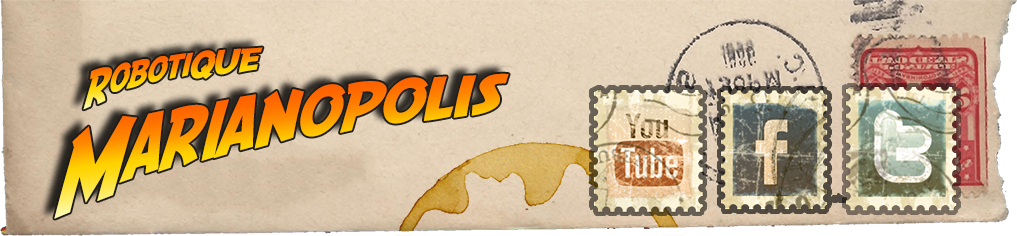
<style>
.page{position:relative;width:1017px;height:236px}
.page>*{position:absolute;margin:0}
.t1{font:32.7px "SFFedora";letter-spacing:-0.03em}
.t2{font:73.2px "SFFedora";letter-spacing:-0.03em}
</style>
<div class="page">
<p class="t1" style="left:83px;top:47px;width:180px;height:63px;rotate:-10deg">RobotiQUE</p>
<p class="t2" style="left:54px;top:73px;width:455px;height:146px;rotate:-10deg">Marianopolis</p>
</div>
